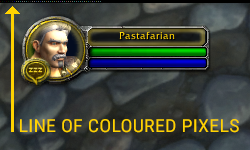
<style>
.page{position:relative;width:250px;height:150px}
.page>*{position:absolute;margin:0}
.t1{font:18px "RobotoCondensed-Regular";letter-spacing:0.01em;color:#ffd200;scale:1.11 1}
</style>
<div class="page">
<p class="t1" style="left:20px;top:119px;width:219px;height:14px">LINE OF COLOURED PIXELS</p>
</div>
